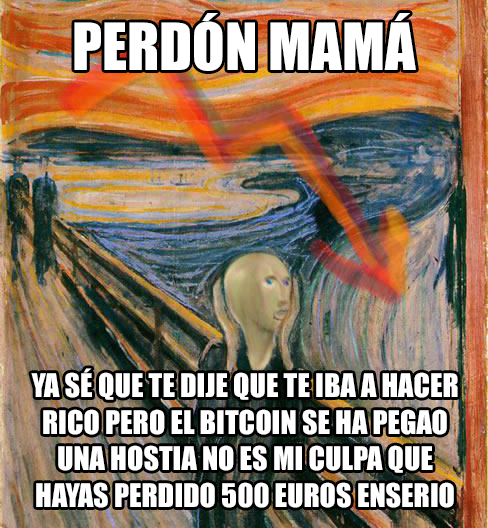
<style>
.page{position:relative;width:488px;height:528px}
.page>*{position:absolute;margin:0}
.t1{font:60px "Impact";color:#ffffff}
.t2{font:30px "Impact";color:#ffffff}
</style>
<div class="page">
<p class="t1" style="left:74px;top:13px;width:342px;height:58px">PERDÓN MAMÁ</p>
<p class="t2" style="left:31px;top:368px;width:427px;height:140px;text-align:center">YA SÉ QUE TE DIJE QUE TE IBA A HACER<br>RICO PERO EL BITCOIN SE HA PEGAO<br>UNA HOSTIA NO ES MI CULPA QUE<br>HAYAS PERDIDO 500 EUROS ENSERIO</p>
</div>
